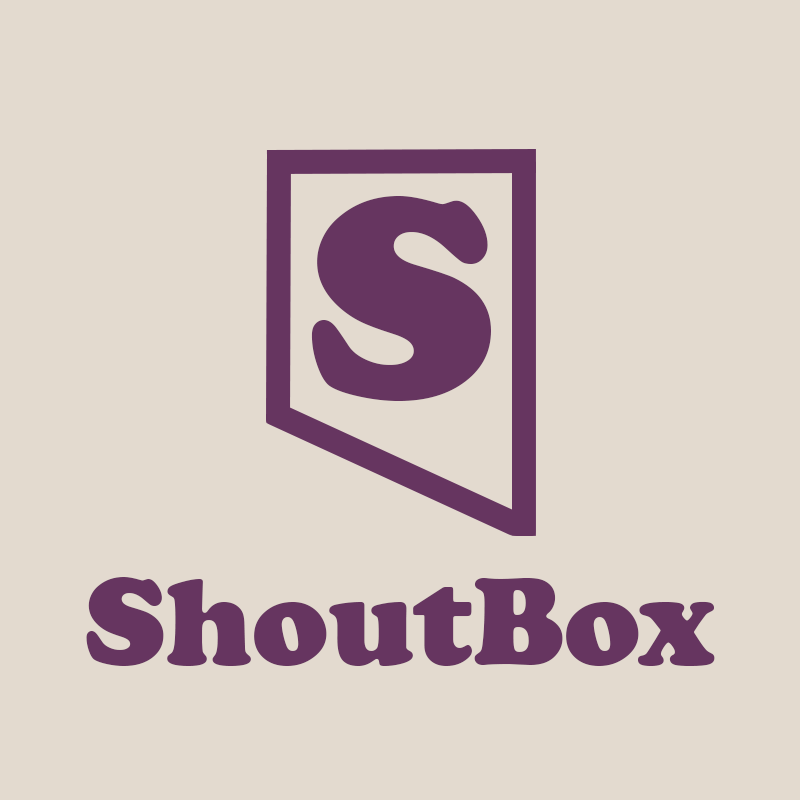
<style>
.page{position:relative;width:800px;height:800px;background:#e3dacf}
.page>*{position:absolute;margin:0}
.t1{font:296.3px "CooperBlack";color:#663560}
.t2{font:127px "CooperBlack";color:#663560}
</style>
<div class="page">
<p class="t1" style="left:311px;top:196px;width:180px;height:205px">S</p>
<p class="t2" style="left:86px;top:577px;width:629px;height:89px">ShoutBox</p>
</div>
